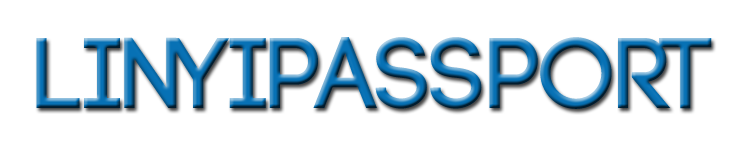
<style>
.page{position:relative;width:748px;height:146px;background:#ffffff}
.page>*{position:absolute;margin:0}
.t1{font:100px "Code-Bold"}
</style>
<div class="page">
<p class="t1" style="left:36px;top:37px;width:676px;height:72px">linyipassport</p>
</div>
